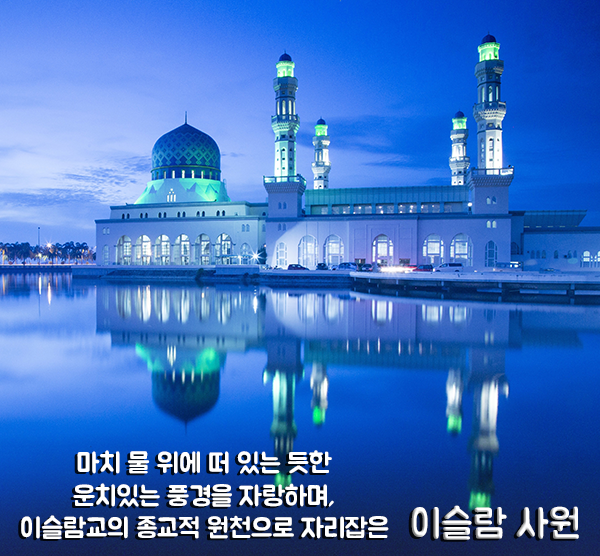
<style>
.page{position:relative;width:600px;height:556px}
.page>*{position:absolute;margin:0}
.t1{font:27px "BMJUA";color:#ffffff}
.t2{font:39.3px "BMJUA"}
</style>
<div class="page">
<p class="t1" style="left:21px;top:450px;width:368px;height:89px;text-align:center">마치 물 위에 떠 있는 듯한<br>운치있는 풍경을 자랑하며,<br>이슬람교의 종교적 원천으로 자리잡은</p>
<p class="t2" style="left:411px;top:505px;width:168px;height:35px">이슬람 사원</p>
</div>
